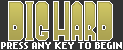
<style>
.page{position:relative;width:123px;height:50px;background:#333333}
.page>*{position:absolute;margin:0}
.t1{font:8px "NokiaCellphoneFC-Small";color:#ffffff}
</style>
<div class="page">
<p class="t1" style="left:1px;top:42px;width:121px;height:7px">PRESS ANY KEY TO BEGIN</p>
</div>
